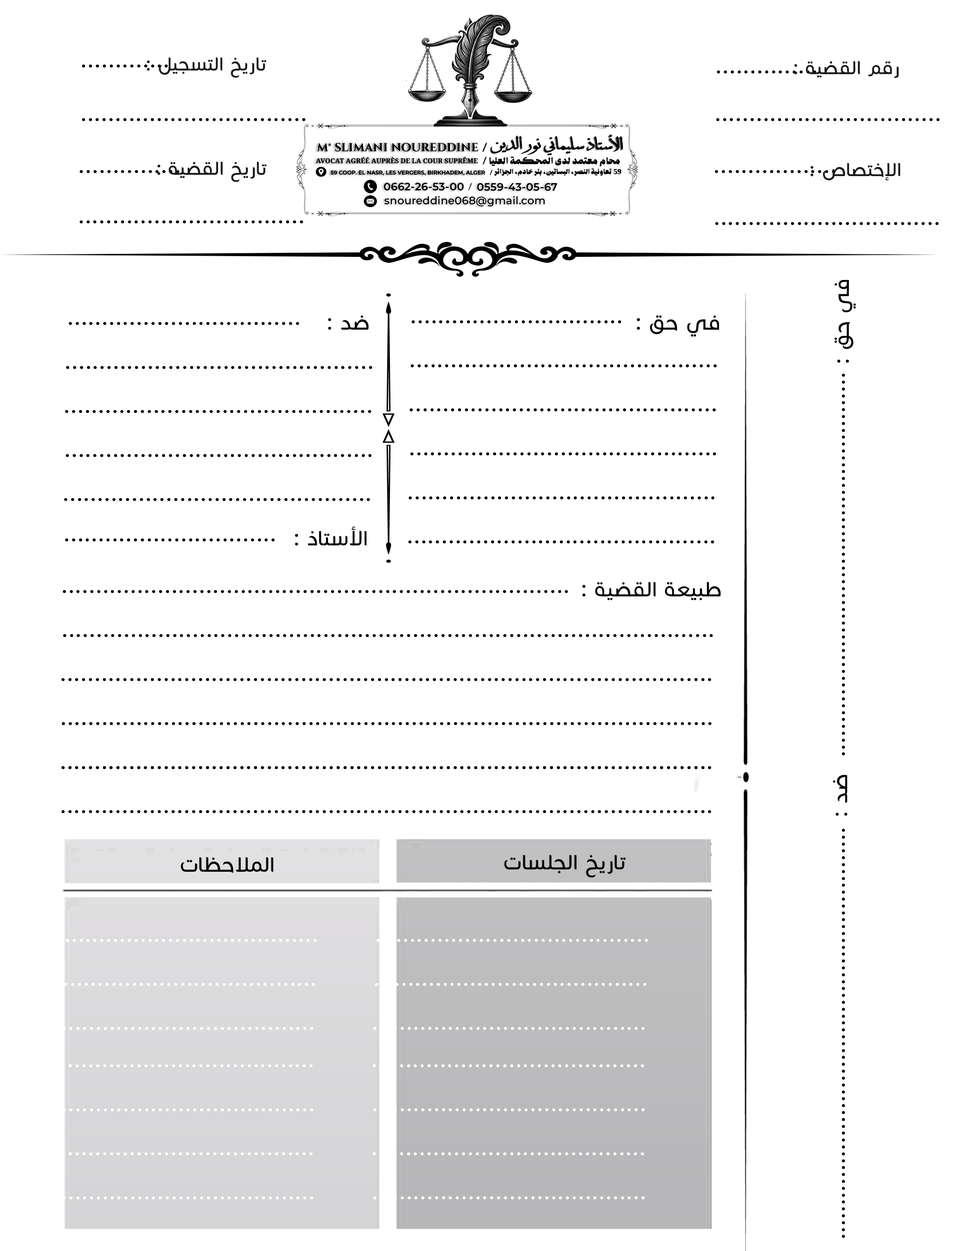
<style>
.page{position:relative;width:953px;height:1251px;background:#ffffff}
.page>*{position:absolute;margin:0}
.t1{font:21.5px "CoconNextArabic-Light";letter-spacing:0.02em;color:#181818}
.t2{font:10.3px "Liftaswash";letter-spacing:0.02em;color:#020000}
.t3{font:7.6px "Liftaswash";letter-spacing:0.02em;color:#020000}
.t4{font:7.6px "Tinos-Bold";letter-spacing:0.02em;color:#020000}
.t5{font:24.2px "CoconNextArabic-Light";letter-spacing:0.02em;color:#000000}
.t6{font:24.2px "CoconNextArabic-Light";letter-spacing:0.02em;color:#020000}
</style>
<div class="page">
<p class="t1" style="left:147px;top:57px;width:119px;height:21px">: ﻞﻴﺠﺴﺘﻟﺍ ﺦﻳﺭﺎﺗ</p>
<p class="t1" style="left:795px;top:61px;width:104px;height:17px">: ﺔﻴﻀﻘﻟﺍ ﻢﻗﺭ</p>
<p class="t1" style="left:157px;top:161px;width:110px;height:21px">: ﺔﻴﻀﻘﻟﺍ ﺦﻳﺭﺎﺗ</p>
<p class="t2" style="left:489px;top:156px;width:131px;height:11px">ﺎﻴﻠﻌﻟا ﺔﻤﻜﺤﻤﻟا ىﺪﻟ ﺪﻤﺘﻌﻣ ٍمﺎﺤﻣ</p>
<p class="t3" style="left:494px;top:168px;width:118px;height:8px">ﺮﺋاﺰﺠﻟا ،مدﺎﺧ ﺮﺌﺑ ،ﻦﻴﺗﺎﺴﺒﻟا ،ﺮﺼﻨﻟا ﺔﻴﻧوﺎﻌﺗ</p>
<p class="t4" style="left:614px;top:169px;width:8px;height:5px">59</p>
<p class="t1" style="left:811px;top:163px;width:90px;height:17px">: ﺹﺎﺼﺘﺧﻹﺍ</p>
<p class="t5" style="left:835px;top:280px;width:21px;height:83px;rotate:-90deg">: ﻖﺣ ﻲﻓ</p>
<p class="t5" style="left:328px;top:315px;width:41px;height:15px">: ﺪﺿ</p>
<p class="t5" style="left:637px;top:315px;width:83px;height:21px">: ﻖﺣ ﻲﻓ</p>
<p class="t6" style="left:295px;top:526px;width:72px;height:20px">: ﺫﺎﺘﺳﻷﺍ</p>
<p class="t6" style="left:583px;top:582px;width:138px;height:18px">: ﺔﻴﻀﻘﻟﺍ ﺔﻌﻴﺒﻃ</p>
<p class="t5" style="left:833px;top:775px;width:15px;height:41px;rotate:-90deg">: ﺪﺿ</p>
<p class="t6" style="left:181px;top:857px;width:93px;height:16px">ﺕﺎﻈﺣﻼﻤﻟﺍ</p>
<p class="t6" style="left:505px;top:855px;width:121px;height:22px">ﺕﺎﺴﻠﺠﻟﺍ ﺦﻳﺭﺎﺗ</p>
</div>
